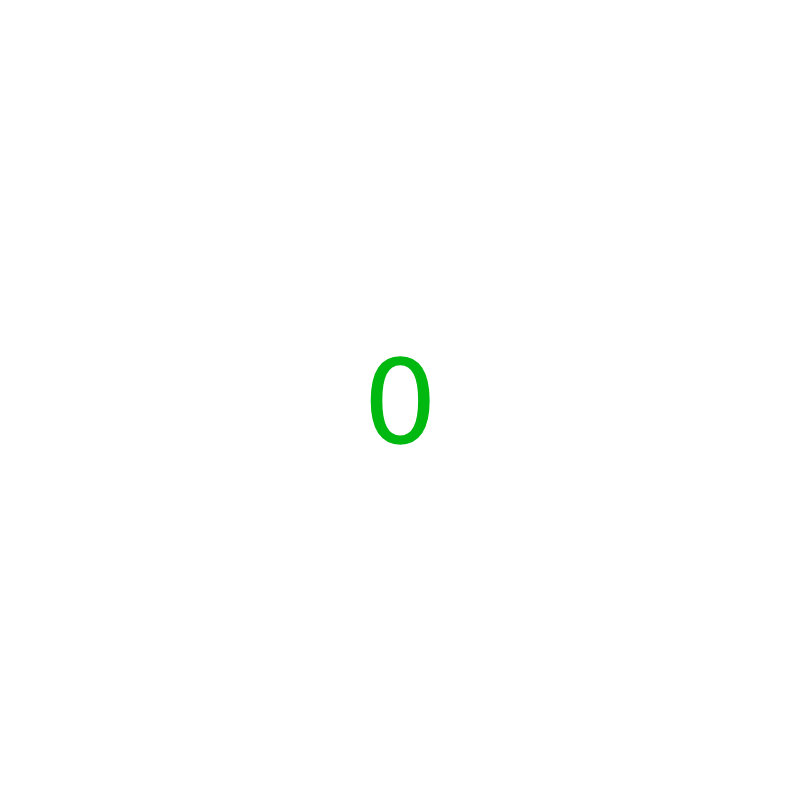
<style>
.page{position:relative;width:800px;height:800px;background:#ffffff}
.page>*{position:absolute;margin:0}
.t1{font:117px "DejaVuSans";color:#00b910}
</style>
<div class="page">
<p class="t1" style="left:370px;top:356px;width:60px;height:89px">0</p>
</div>
